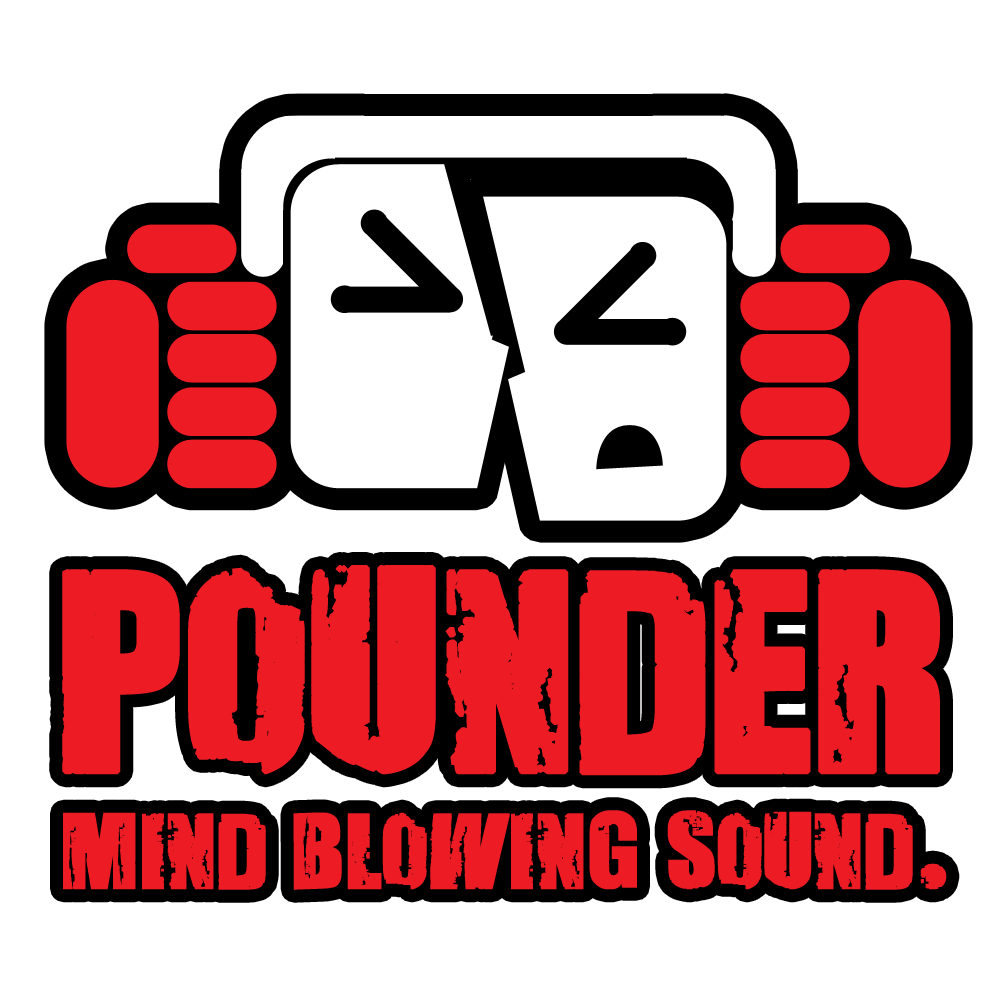
<style>
.page{position:relative;width:1000px;height:1000px;background:#ffffff}
.page>*{position:absolute;margin:0}
.t1{font:89.6px/116.7px "VeryDamaged-Bold";color:#ed1c24;font-weight:bold}
.t2{font:237.5px "VeryDamaged-Bold";color:#ed1c24;font-weight:bold}
</style>
<div class="page">
<p class="t1" style="left:62px;top:565px;width:885px;height:325px;text-align:center"><span class="t2">POUNDER<br></span>MIND BLOWING SOUND.</p>
</div>
